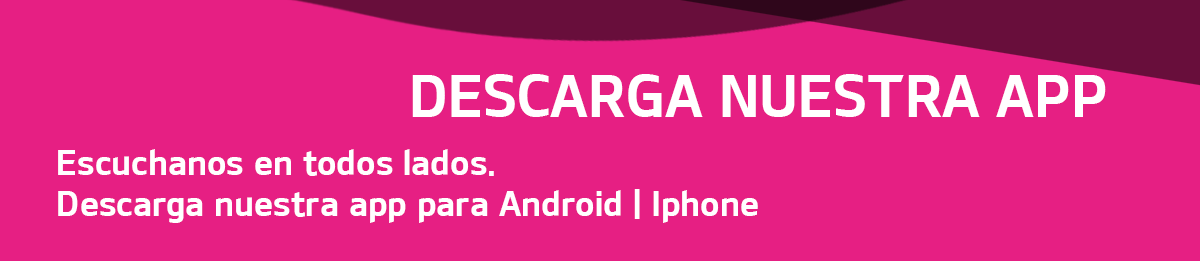
<style>
.page{position:relative;width:1200px;height:261px;background:#e61f83}
.page>*{position:absolute;margin:0}
.t1{font:57.8px "KIAB";color:#ffffff}
.t2{font:34.3px "KIAB";color:#ffffff}
</style>
<div class="page">
<p class="t1" style="left:412px;top:74px;width:694px;height:43px">DESCARGA NUESTRA APP</p>
<p class="t2" style="left:58px;top:149px;width:700px;height:74px">Escuchanos en todos lados. <br>Descarga nuestra app para Android | Iphone</p>
</div>
